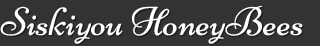
<style>
.page{position:relative;width:320px;height:46px;background:#333333}
.page>*{position:absolute;margin:0}
.t1{font:40px "Niconne-Regular";color:#ffffff}
</style>
<div class="page">
<p class="t1" style="left:0px;top:5px;width:303px;height:39px">Siskiyou HoneyBees</p>
</div>
